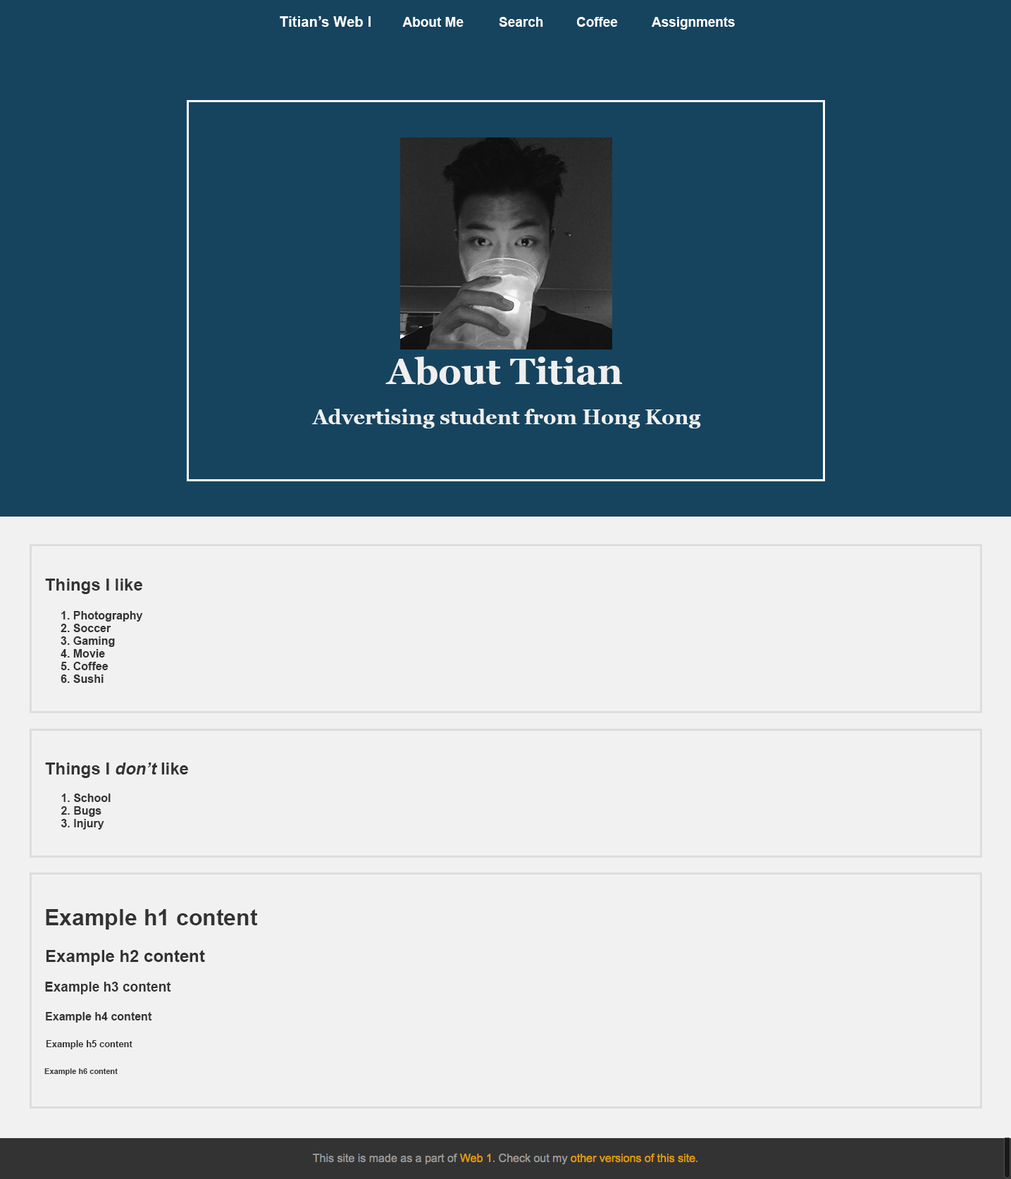
<style>
.page{position:relative;width:1011px;height:1179px;background:#f1f1f1}
.page>*{position:absolute;margin:0}
.t1{font:14.1px "Arial-BoldMT";color:#ffffff}
.t2{font:13.4px "Arial-BoldMT";color:#ffffff}
.t3{font:13.2px "Arial-BoldMT";color:#ffffff}
.t4{font:36.6px "Georgia-Bold";color:#efefef}
.t5{font:20.4px "Georgia-Bold";color:#efefef}
.t6{font:16.9px "Arial-BoldMT";color:#333333}
.t7{font:11.3px/12.7px "Arial-BoldMT";color:#333333}
.t8{font:16.9px "Arial-BoldMT";color:#333333;font-style:italic}
.t9{font:22.6px "Arial-BoldMT";color:#333333}
.t10{font:13.4px "Arial-BoldMT";color:#333333}
.t11{font:11.3px "Arial-BoldMT";color:#333333}
.t12{font:9.2px "Arial-BoldMT";color:#333333}
.t13{font:7.8px "Arial-BoldMT";color:#333333}
</style>
<div class="page">
<p class="t1" style="left:280px;top:16px;width:91px;height:11px">Titian’s Web I</p>
<p class="t2" style="left:402px;top:17px;width:62px;height:10px">About Me</p>
<p class="t2" style="left:499px;top:17px;width:44px;height:10px">Search</p>
<p class="t3" style="left:577px;top:17px;width:41px;height:10px">Coffee</p>
<p class="t3" style="left:652px;top:17px;width:83px;height:13px">Assignments</p>
<p class="t4" style="left:386px;top:357px;width:236px;height:28px">About Titian</p>
<p class="t5" style="left:312px;top:409px;width:389px;height:19px">Advertising student from Hong Kong</p>
<p class="t6" style="left:45px;top:579px;width:97px;height:15px">Things I like</p>
<p class="t7" style="left:61px;top:611px;width:82px;height:72px">1. Photography<br>2. Soccer <br>3. Gaming<br>4. Movie<br>5. Coffee<br>6. Sushi</p>
<p class="t6" style="left:45px;top:763px;width:143px;height:15px">Things I <span class="t8">don’t</span> like</p>
<p class="t7" style="left:61px;top:794px;width:50px;height:36px">1. School<br>2. Bugs<br>3. Injury</p>
<p class="t9" style="left:46px;top:909px;width:212px;height:21px">Example h1 content</p>
<p class="t6" style="left:46px;top:950px;width:159px;height:16px">Example h2 content</p>
<p class="t10" style="left:45px;top:982px;width:126px;height:12px">Example h3 content</p>
<p class="t11" style="left:46px;top:1012px;width:106px;height:11px">Example h4 content</p>
<p class="t12" style="left:46px;top:1040px;width:86px;height:9px">Example h5 content</p>
<p class="t13" style="left:44px;top:1068px;width:74px;height:7px">Example h6 content</p>
</div>
